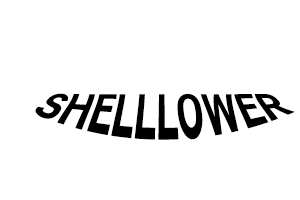
<style>
.page{position:relative;width:300px;height:200px;background:#ffffff}
.page>*{position:absolute;margin:0}
.t1{font:36px "Roboto-Bold";color:#000000}
</style>
<div class="page">
<p class="t1" style="left:35px;top:93px;width:260px;height:47px">SHELLLOWER</p>
</div>
